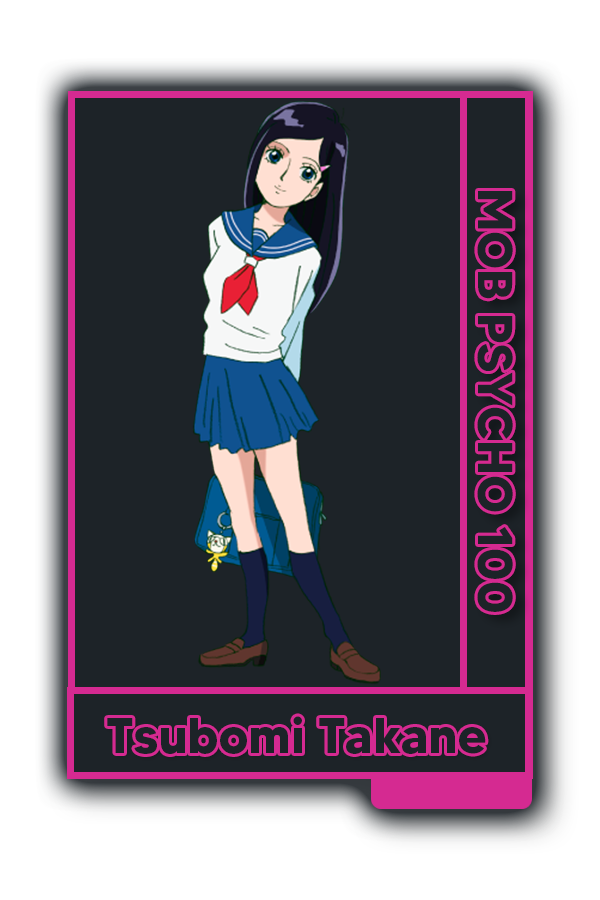
<style>
.page{position:relative;width:600px;height:900px;background:#1d2328}
.page>*{position:absolute;margin:0}
.t1{font:48.8px "MADETOMMY-Bold";color:#1d2328}
.t2{font:49.7px "MADETOMMY-Bold";color:#1d2328}
</style>
<div class="page">
<p class="t1" style="left:477px;top:191px;width:36px;height:421px;rotate:90deg">MOB PSYCHO 100</p>
<p class="t2" style="left:107px;top:716px;width:379px;height:38px">Tsubomi Takane</p>
</div>
